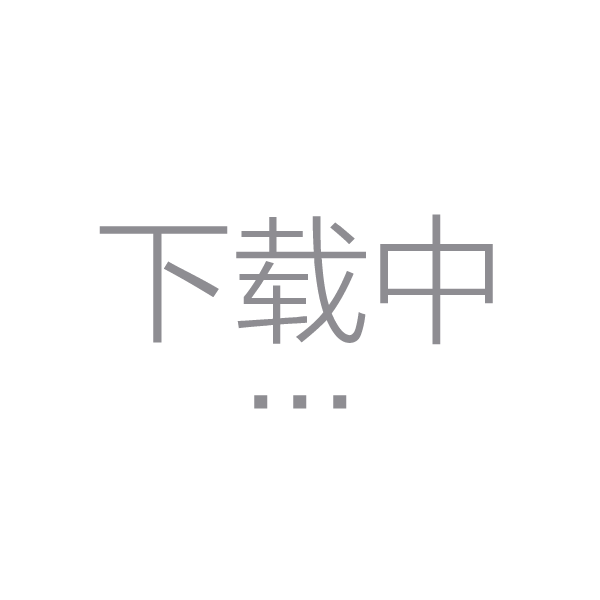
<style>
.page{position:relative;width:600px;height:600px;background:#ffffff}
.page>*{position:absolute;margin:0}
.t1{font:136.8px/158.8px "FZLTXHK--GBK1-0";color:#8e8d92}
.t2{font:136.8px/76.8px "FZLTXHK--GBK1-0";color:#8e8d92}
</style>
<div class="page">
<p class="t1" style="left:99px;top:214px;width:394px;height:195px;text-align:center">下载中<br><span class="t2">...</span></p>
</div>
